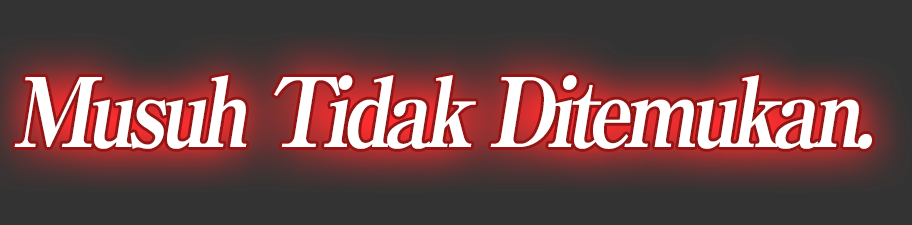
<style>
.page{position:relative;width:912px;height:225px;background:#333333}
.page>*{position:absolute;margin:0}
.t1{font:96px "RyuminPro-ExBold";letter-spacing:-0.08em;color:#ffffff;font-style:italic;scale:0.9 1}
</style>
<div class="page">
<p class="t1" style="left:14px;top:75px;width:858px;height:74px">Musuh Tidak Ditemukan.</p>
</div>
